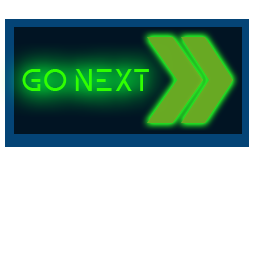
<style>
.page{position:relative;width:256px;height:256px;background:#ffffff}
.page>*{position:absolute;margin:0}
.t1{font:30px "ZELDA";color:#30ff00}
</style>
<div class="page">
<p class="t1" style="left:22px;top:69px;width:127px;height:22px">Go next</p>
</div>
